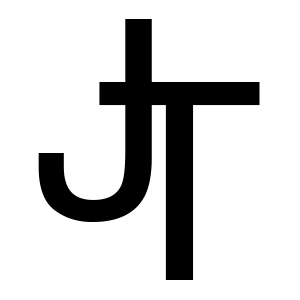
<style>
.page{position:relative;width:300px;height:300px;background:#ffffff}
.page>*{position:absolute;margin:0}
.t1{font:275px "Helvetica";color:#000000}
</style>
<div class="page">
<p class="t1" style="left:38px;top:19px;width:114px;height:203px">J</p>
<p class="t1" style="left:99px;top:82px;width:161px;height:198px">T</p>
</div>
